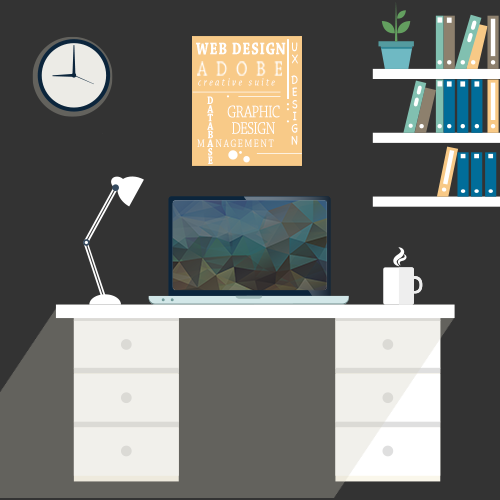
<style>
.page{position:relative;width:500px;height:500px;background:#333333}
.page>*{position:absolute;margin:0}
.t1{font:17.7px "ChaparralPro-Bold";letter-spacing:0.045em;color:#ffffff;scale:0.8 1}
.t2{font:12.6px/12.1px "ChalkboardSE-Light";letter-spacing:0.045em;color:#ffffff;scale:0.8 1}
.t3{font:11.4px "ChaparralPro-Italic";letter-spacing:0.265em;scale:0.8 1}
.t4{font:11.4px/8.6px "ChaparralPro-Bold";letter-spacing:-0.055em;color:#ffffff;scale:0.8 1}
.t5{font:17.7px/16.4px "ChaparralPro-Regular";letter-spacing:-0.055em;color:#ffffff;scale:0.8 1}
.t6{font:11.4px "ChaparralPro-Regular";letter-spacing:-0.055em;color:#ffffff;scale:0.8 1}
.t7{font:11.4px "ChaparralPro-Regular";letter-spacing:0.165em;color:#ffffff;scale:0.8 1}
</style>
<div class="page">
<p class="t1" style="left:196px;top:42px;width:90px;height:13px">WEB DESIGN</p>
<p class="t2" style="left:291px;top:42px;width:7px;height:103px;text-align:center">U<br>X<br><br>D<br>E<br>S<br>I<br>G<br>N</p>
<p class="t3" style="left:198px;top:78px;width:77px;height:8px">creative suite</p>
<p class="t4" style="left:207px;top:96px;width:7px;height:68px;text-align:center">D<br>A<br>T<br>A<br>B<br>A<br>S<br>E</p>
<p class="t5" style="left:227px;top:105px;width:53px;height:29px;text-align:center">GRAPHIC<br>DESIGN</p>
<p class="t6" style="left:197px;top:139px;width:8px;height:8px">M</p>
<p class="t7" style="left:215px;top:139px;width:59px;height:8px">NAGEMENT</p>
</div>
